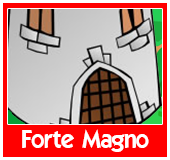
<style>
.page{position:relative;width:170px;height:160px;background:#ff0000}
.page>*{position:absolute;margin:0}
.t1{font:24px "ELEGANCE";color:#ffffff}
</style>
<div class="page">
<p class="t1" style="left:22px;top:129px;width:127px;height:23px">Forte Magno</p>
</div>
